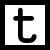
<style>
.page{position:relative;width:50px;height:50px;background:#ffffff}
.page>*{position:absolute;margin:0}
.t1{font:50px "OCRAStd";color:#000000}
</style>
<div class="page">
<p class="t1" style="left:13px;top:7px;width:24px;height:36px">t</p>
</div>
